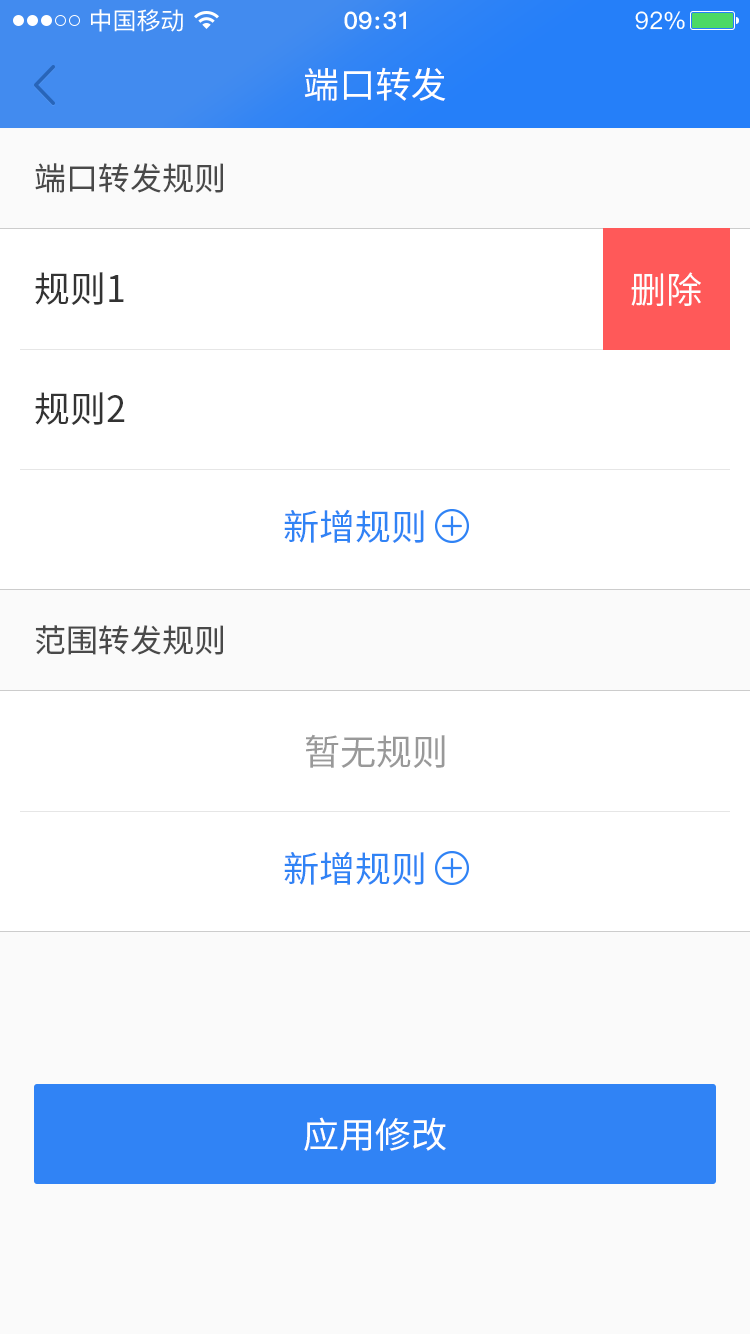
<style>
.page{position:relative;width:750px;height:1334px;background:#ffffff}
.page>*{position:absolute;margin:0}
.t1{font:36px "SourceHanSansCN-Regular";color:#ffffff}
.t2{font:32px "SourceHanSansCN-Regular";color:#494949}
.t3{font:36px "SourceHanSansCN-Regular";color:#333333}
.t4{font:36px "SourceHanSansCN-Normal";color:#fefefe}
.t5{font:36px "SourceHanSansCN-Regular";color:#3083f5}
.t6{font:36px "SourceHanSansCN-Regular";color:#999999}
</style>
<div class="page">
<p class="t1" style="left:304px;top:67px;width:142px;height:34px">端口转发</p>
<p class="t2" style="left:35px;top:163px;width:188px;height:30px">端口转发规则</p>
<p class="t3" style="left:35px;top:272px;width:89px;height:33px">规则1</p>
<p class="t4" style="left:631px;top:272px;width:70px;height:34px">删除</p>
<p class="t3" style="left:35px;top:392px;width:90px;height:33px">规则2</p>
<p class="t5" style="left:284px;top:509px;width:140px;height:34px">新增规则</p>
<p class="t2" style="left:35px;top:625px;width:188px;height:30px">范围转发规则</p>
<p class="t6" style="left:306px;top:734px;width:139px;height:34px">暂无规则</p>
<p class="t5" style="left:284px;top:851px;width:140px;height:34px">新增规则</p>
<p class="t1" style="left:304px;top:1117px;width:142px;height:34px">应用修改</p>
</div>
